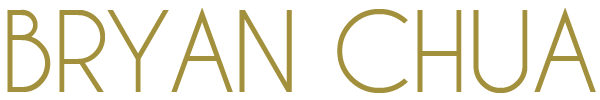
<style>
.page{position:relative;width:600px;height:100px;background:#ffffff}
.page>*{position:absolute;margin:0}
.t1{font:105px "CaviarDreams";letter-spacing:-0.025em;color:#a2903c;text-transform:uppercase}
</style>
<div class="page">
<p class="t1" style="left:7px;top:7px;width:589px;height:86px">BRYAN CHUA</p>
</div>
